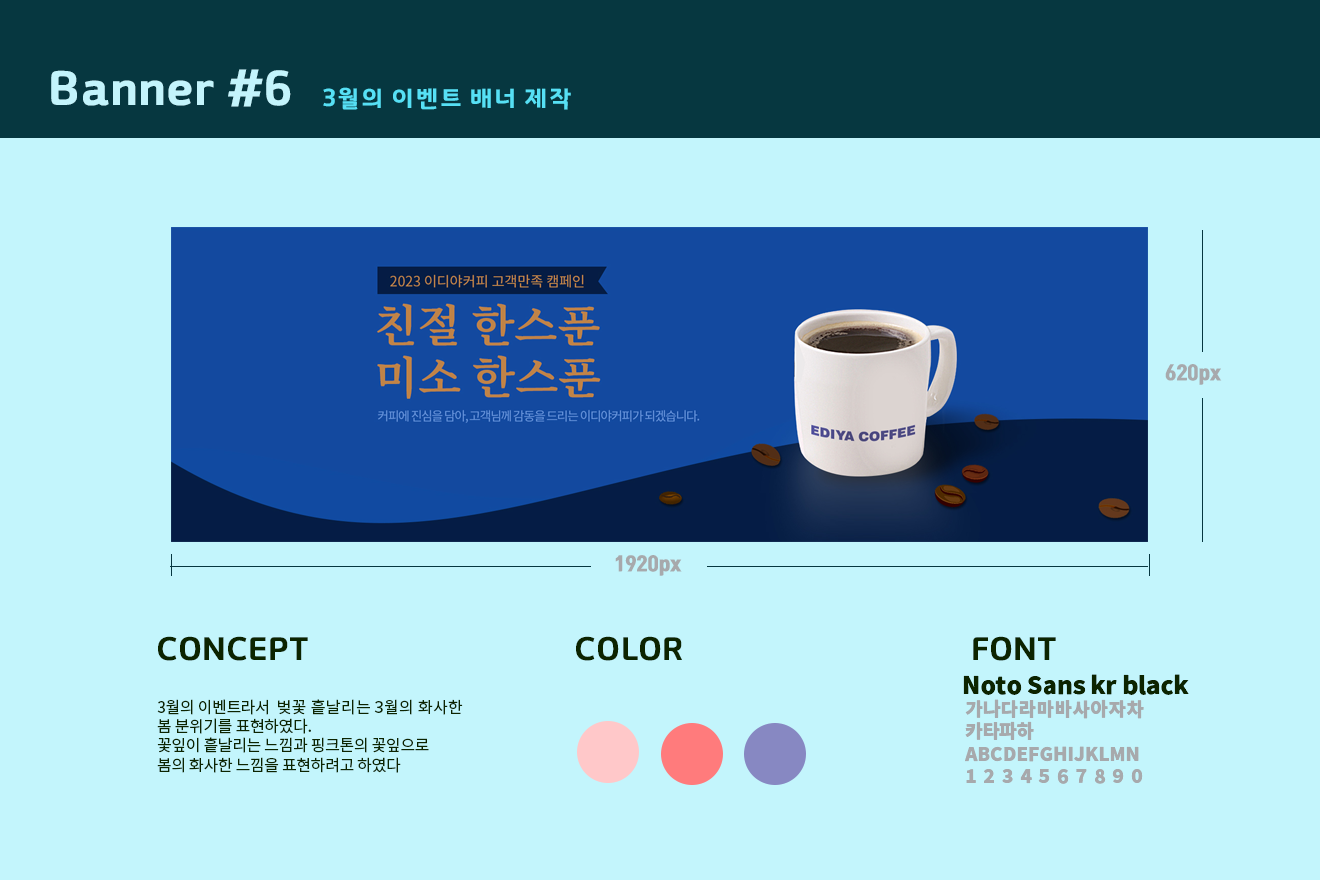
<style>
.page{position:relative;width:1320px;height:880px;background:#c3f5fc}
.page>*{position:absolute;margin:0}
.t1{font:48px "GyeonggiTitleV";color:#c3f4fc}
.t2{font:24px "GyeonggiTitleV";color:#56e0f5}
.t3{font:18.7px "TmonMonsoriBlack";color:#a7a9ac}
.t4{font:32px "GyeonggiTitleV";color:#0c2400}
.t5{font:24px "NotoSansKR-Black";color:#0c2400}
.t6{font:16px "NotoSansKR-Regular";letter-spacing:-0.02em;color:#0c2400}
.t7{font:16px "NotoSansKR-Regular";letter-spacing:0.02em;color:#0c2400}
.t8{font:18.7px "NotoSansKR-Black";color:#a7a9ac}
.t9{font:18.7px "NotoSansKR-Black";letter-spacing:0.04em;color:#a7a9ac}
.t10{font:18.7px "NotoSansKR-Black";letter-spacing:0.38em;color:#a7a9ac}
</style>
<div class="page">
<p class="t1" style="left:51px;top:69px;width:240px;height:38px">Banner #6</p>
<p class="t2" style="left:323px;top:87px;width:248px;height:23px">3월의 이벤트 배너 제작</p>
<p class="t3" style="left:1165px;top:364px;width:57px;height:21px">620px</p>
<p class="t3" style="left:615px;top:555px;width:67px;height:21px">1920px</p>
<p class="t4" style="left:158px;top:636px;width:150px;height:25px">CONCEPT</p>
<p class="t4" style="left:576px;top:636px;width:106px;height:25px">COLOR</p>
<p class="t4" style="left:973px;top:636px;width:83px;height:25px">FONT</p>
<p class="t5" style="left:963px;top:674px;width:226px;height:21px">Noto Sans kr black</p>
<p class="t6" style="left:157px;top:699px;width:306px;height:74px">3월의 이벤트라서 <span class="t7"> 벚꽃 흩날리는 3월의 화사한</span><br>봄 분위기를 표현하였다.<br>꽃잎이 흩날리는 느낌과 핑크톤의 꽃잎으로  <br>봄의 화사한 느낌을 표현하려고 하였다</p>
<p class="t8" style="left:965px;top:699px;width:179px;height:85px"><span class="t9">가나다라마바사아자차<br></span>카타파하<br>ABCDEFGHIJKLMN<br><span class="t10">1234567890</span></p>
</div>
